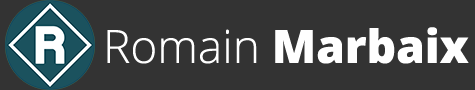
<style>
.page{position:relative;width:475px;height:90px;background:#333333}
.page>*{position:absolute;margin:0}
.t1{font:46px "OpenSans-Extrabold";color:#ffffff}
.t2{font:46px "OpenSans-Light";color:#ffffff}
</style>
<div class="page">
<p class="t1" style="left:107px;top:27px;width:362px;height:37px"><span class="t2">Romain </span>Marbaix</p>
</div>
